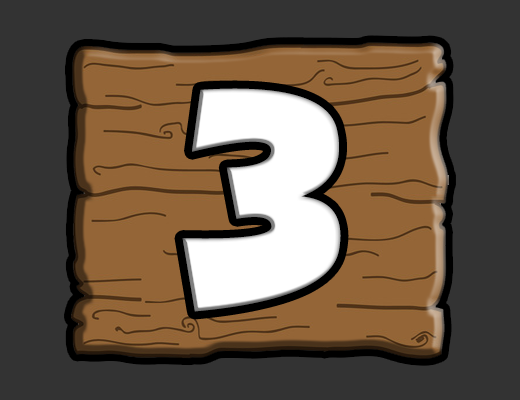
<style>
.page{position:relative;width:520px;height:400px;background:#333333}
.page>*{position:absolute;margin:0}
.t1{font:300px "Funhouse";color:#ffffff}
</style>
<div class="page">
<p class="t1" style="left:182px;top:88px;width:159px;height:224px">3</p>
</div>
